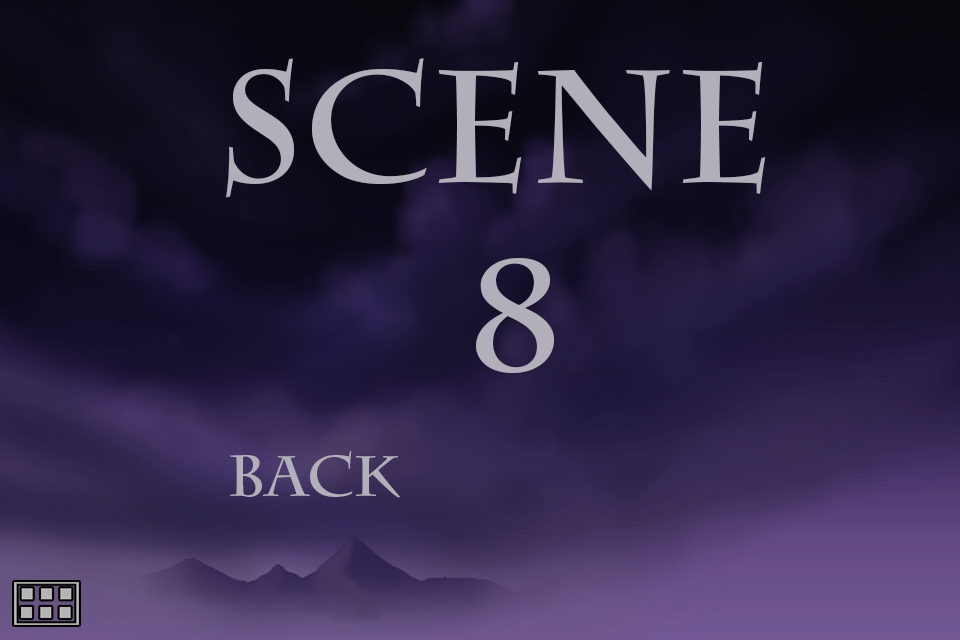
<style>
.page{position:relative;width:960px;height:640px}
.page>*{position:absolute;margin:0}
.t1{font:158px "CharlemagneStd-Bold";color:#b2afba}
.t2{font:57.7px "CharlemagneStd-Bold";color:#b2afba}
</style>
<div class="page">
<p class="t1" style="left:226px;top:58px;width:540px;height:315px;text-align:center">scene <br>8</p>
<p class="t2" style="left:230px;top:451px;width:170px;height:47px">back</p>
</div>
